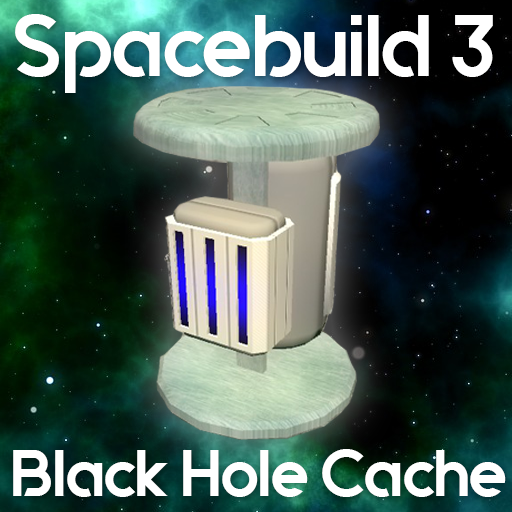
<style>
.page{position:relative;width:512px;height:512px}
.page>*{position:absolute;margin:0}
.t1{font:87px "Quantify-Bold";color:#ffffff}
.t2{font:66px "Quantify-Bold";color:#ffffff}
</style>
<div class="page">
<p class="t1" style="left:15px;top:14px;width:478px;height:79px">Spacebuild 3</p>
<p class="t2" style="left:13px;top:449px;width:493px;height:48px">Black Hole Cache</p>
</div>
